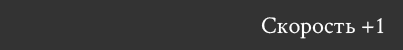
<style>
.page{position:relative;width:403px;height:50px;background:#333333}
.page>*{position:absolute;margin:0}
.t1{font:24px "CrimsonText-Regular";color:#ffffff}
</style>
<div class="page">
<p class="t1" style="left:261px;top:17px;width:123px;height:22px">Скорость +1</p>
</div>
